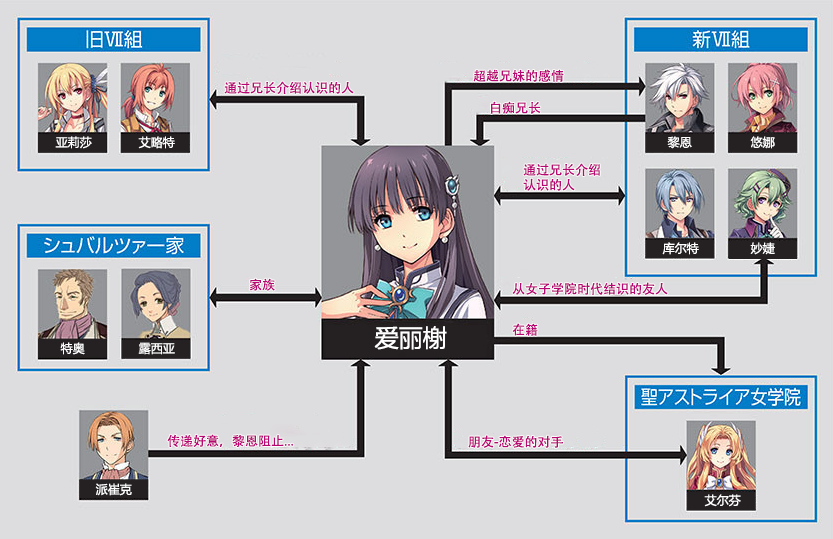
<style>
.page{position:relative;width:833px;height:539px;background:#dddddf}
.page>*{position:absolute;margin:0}
.t1{font:13px "AdobeHeitiStd-Regular";color:#b70773}
.t2{font:12px "MicrosoftYaHei";color:#ffffff}
.t3{font:13px/15px "AdobeHeitiStd-Regular";color:#b70773}
.t4{font:24px "MicrosoftYaHei";color:#ffffff}
</style>
<div class="page">
<p class="t1" style="left:473px;top:69px;width:91px;height:13px">超越兄妹的感情</p>
<p class="t1" style="left:224px;top:81px;width:130px;height:13px">通过兄长介绍认识的人</p>
<p class="t1" style="left:490px;top:101px;width:51px;height:13px">白痴兄长</p>
<p class="t2" style="left:55px;top:136px;width:37px;height:13px">亚莉莎</p>
<p class="t2" style="left:138px;top:136px;width:37px;height:13px">艾略特</p>
<p class="t2" style="left:667px;top:136px;width:25px;height:13px">黎恩</p>
<p class="t2" style="left:750px;top:136px;width:25px;height:13px">悠娜</p>
<p class="t3" style="left:523px;top:163px;width:77px;height:28px">通过兄长介绍<br>认识的人</p>
<p class="t2" style="left:662px;top:242px;width:37px;height:13px">库尔特</p>
<p class="t2" style="left:750px;top:242px;width:25px;height:13px">妙婕</p>
<p class="t1" style="left:249px;top:278px;width:26px;height:13px">家族</p>
<p class="t1" style="left:512px;top:282px;width:156px;height:13px">从女子学院时代结识的友人</p>
<p class="t4" style="left:374px;top:326px;width:73px;height:24px">爱丽榭</p>
<p class="t1" style="left:512px;top:323px;width:26px;height:13px">在籍</p>
<p class="t2" style="left:60px;top:342px;width:25px;height:13px">特奥<br>特奥</p>
<p class="t2" style="left:138px;top:342px;width:37px;height:13px">露西亚</p>
<p class="t1" style="left:167px;top:434px;width:127px;height:13px">传递好意，黎恩阻止...</p>
<p class="t1" style="left:468px;top:435px;width:95px;height:13px">朋友-恋爱的对手</p>
<p class="t2" style="left:95px;top:483px;width:37px;height:13px">派崔克</p>
<p class="t2" style="left:704px;top:494px;width:37px;height:13px">艾尔芬</p>
</div>
